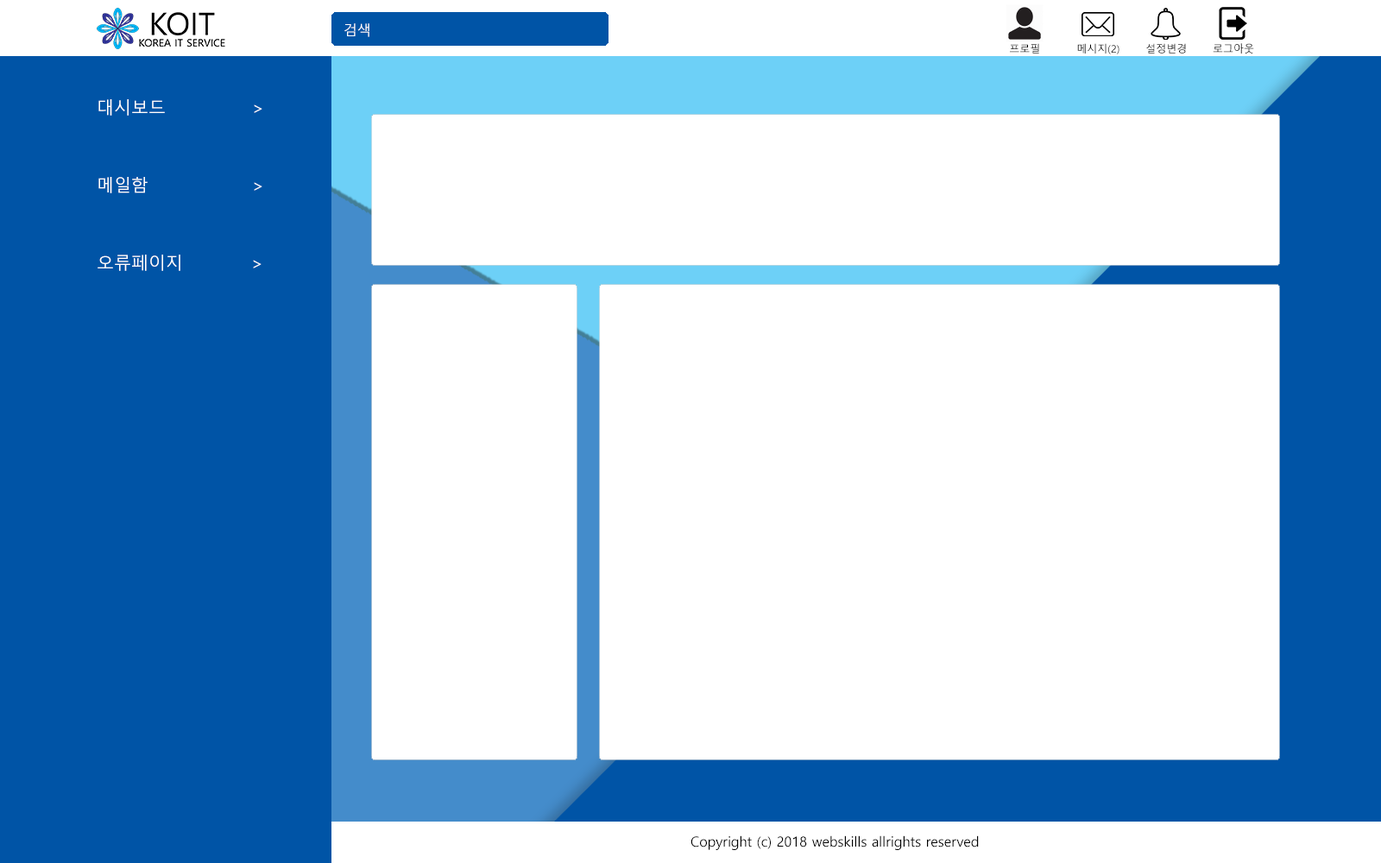
<style>
.page{position:relative;width:1381px;height:863px;background:#ffffff}
.page>*{position:absolute;margin:0}
.t1{font:13.8px "MalgunGothic";color:#ffffff}
.t2{font:10.4px "MalgunGothic";color:#000000}
.t3{font:10.7px "MalgunGothic";scale:0.97 1}
.t4{font:17.3px/77.7px "MalgunGothic";color:#ffffff}
.t5{font:13.8px "MalgunGothic";color:#000000}
</style>
<div class="page">
<p class="t1" style="left:344px;top:23px;width:25px;height:14px">검색</p>
<p class="t2" style="left:1010px;top:43px;width:29px;height:11px">프로필</p>
<p class="t2" style="left:1077px;top:43px;width:43px;height:11px">메시지(2)</p>
<p class="t2" style="left:1146px;top:43px;width:40px;height:11px">설정변경</p>
<p class="t3" style="left:1213px;top:43px;width:41px;height:11px">로그아웃</p>
<p class="t4" style="left:98px;top:99px;width:164px;height:172px">대시보드   &gt;<br>메일함    &gt;<br>오류페이지       &gt;</p>
<p class="t5" style="left:691px;top:836px;width:288px;height:14px">Copyright (c) 2018 webskills allrights reserved</p>
</div>
